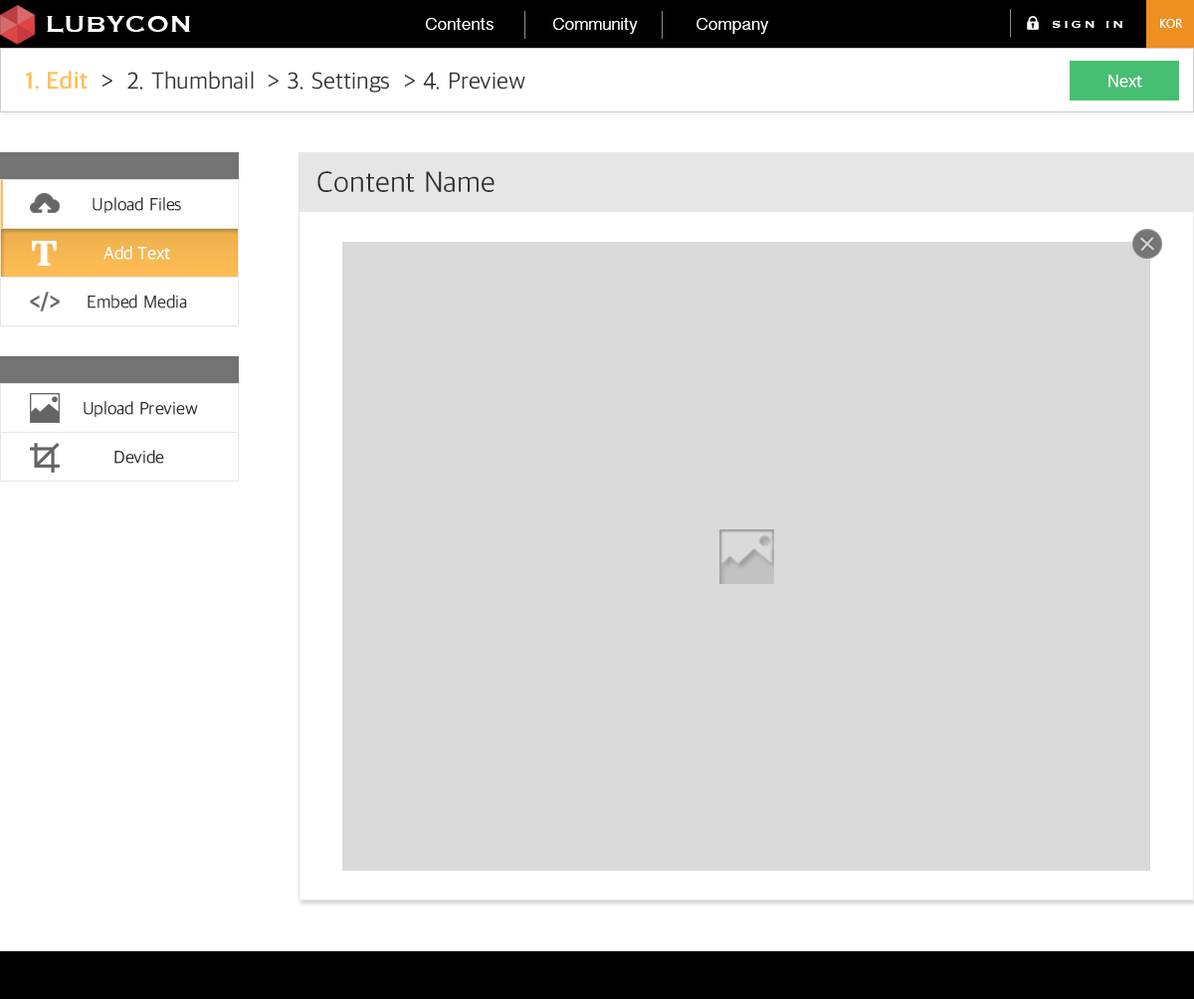
<style>
.page{position:relative;width:1194px;height:999px;background:#dadada}
.page>*{position:absolute;margin:0}
.t1{font:29.8px "Copperplate";color:#ffffff}
.t2{font:17.9px "TamilSangamMN";color:#ffffff}
.t3{font:13.9px "Copperplate";letter-spacing:0.2em;color:#ffffff}
.t4{font:11.9px "LaoUI";color:#ffffff}
.t5{font:23.9px "AppleSDGothicNeo-Light";color:#353535}
.t6{font:23.9px "AppleSDGothicNeo-Bold";color:#ffbe54}
.t7{font:17.9px "AppleSDGothicNeo-Light";color:#ffffff}
.t8{font:29.8px "AppleSDGothicNeo-Light";color:#2e2e2e}
.t9{font:17.9px "AppleSDGothicNeo-Light";color:#2f2f2f}
.t10{font:17.9px "AppleSDGothicNeo-Light";color:#353535}
.t11{font:17.9px "AppleSDGothicNeo-Light";color:#2e2e2e}
</style>
<div class="page">
<p class="t1" style="left:47px;top:16px;width:143px;height:17px">LUBYCON</p>
<p class="t2" style="left:426px;top:18px;width:67px;height:12px">Contents</p>
<p class="t2" style="left:553px;top:18px;width:85px;height:16px">Community</p>
<p class="t2" style="left:696px;top:18px;width:73px;height:16px">Company</p>
<p class="t3" style="left:1053px;top:21px;width:69px;height:7px">SIGN IN</p>
<p class="t4" style="left:1160px;top:19px;width:23px;height:9px">KOR</p>
<p class="t5" style="left:26px;top:71px;width:499px;height:22px"><span class="t6">1. Edit</span>  &gt;  2. Thumbnail  &gt; 3. Settings  &gt; 4. Preview</p>
<p class="t7" style="left:1108px;top:75px;width:34px;height:13px">Next</p>
<p class="t8" style="left:317px;top:171px;width:177px;height:21px">Content Name</p>
<p class="t9" style="left:93px;top:197px;width:88px;height:16px">Upload Files</p>
<p class="t7" style="left:103px;top:246px;width:67px;height:14px">Add Text</p>
<p class="t10" style="left:88px;top:294px;width:99px;height:14px">Embed Media</p>
<p class="t9" style="left:84px;top:401px;width:114px;height:16px">Upload Preview</p>
<p class="t11" style="left:114px;top:450px;width:50px;height:14px">Devide</p>
</div>
